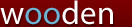
<style>
.page{position:relative;width:132px;height:27px}
.page>*{position:absolute;margin:0}
.t1{font:33px "MyriadPro-Regular";letter-spacing:0.01em;color:#ffffff}
.t2{font:33px "MyriadPro-Regular";letter-spacing:0.01em;color:#6cb4d6}
</style>
<div class="page">
<p class="t1" style="left:0px;top:0px;width:113px;height:25px">w<span class="t2">oo</span>den</p>
</div>
